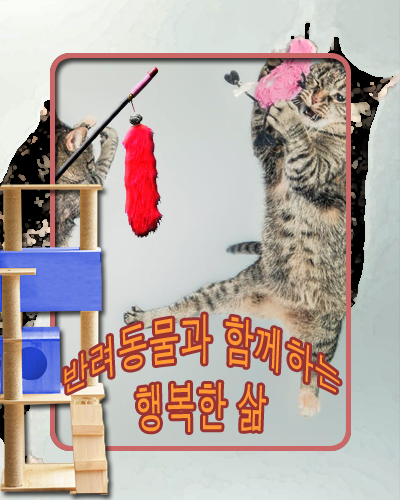
<style>
.page{position:relative;width:400px;height:500px}
.page>*{position:absolute;margin:0}
.t1{font:30px "Dotum";color:#ff9933}
</style>
<div class="page">
<p class="t1" style="left:64px;top:314px;width:276px;height:118px;text-align:center">반려동물과 함께하는<br>행복한 삶</p>
</div>
